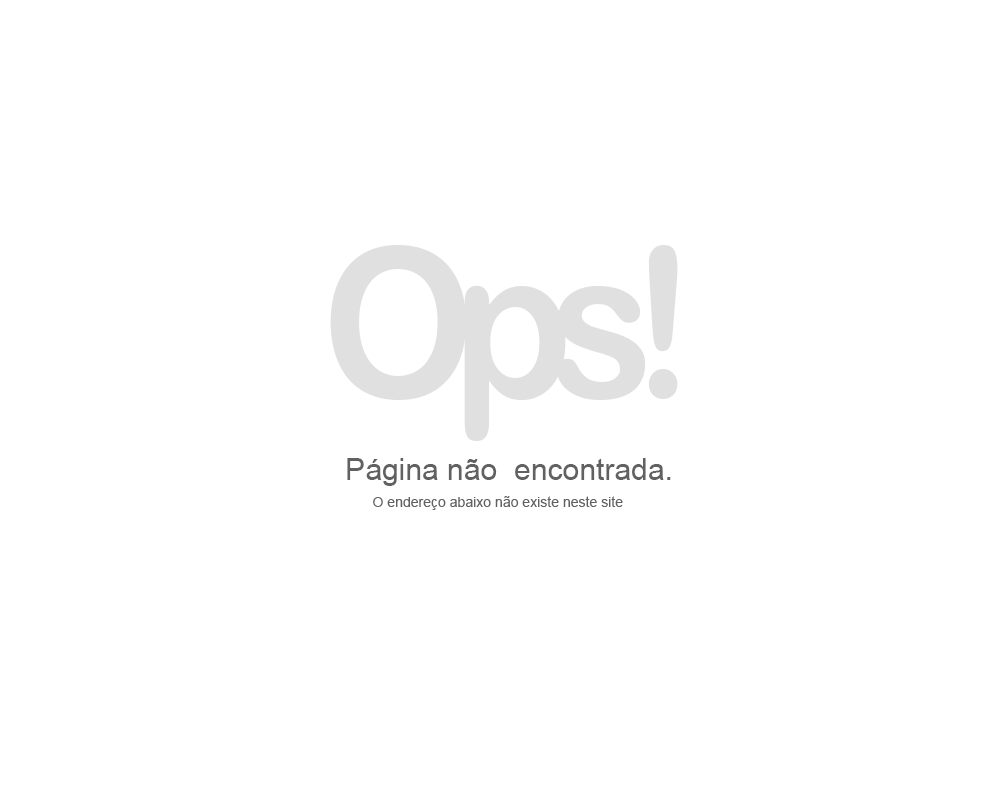
<style>
.page{position:relative;width:1000px;height:800px;background:#ffffff}
.page>*{position:absolute;margin:0}
.t1{font:209.3px "ArialRoundedMTBold";letter-spacing:-0.12em;color:#e0e0e0;scale:0.92 1}
.t2{font:30px "ArialMT";color:#616161}
.t3{font:14px "ArialMT";color:#616161}
</style>
<div class="page">
<p class="t1" style="left:330px;top:245px;width:348px;height:196px">Ops!</p>
<p class="t2" style="left:347px;top:458px;width:324px;height:28px">Página não  encontrada.</p>
<p class="t3" style="left:373px;top:496px;width:250px;height:14px">O endereço abaixo não existe neste site</p>
</div>
